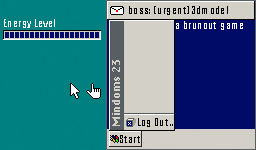
<style>
.page{position:relative;width:256px;height:150px;background:#d3d0c8}
.page>*{position:absolute;margin:0}
.t1{font:10.4px "Impact";color:#000000}
.t2{font:10.4px "Impact";color:#ffffff}
.t3{font:10.4px "Krungthep";color:#d3d0c8}
.t4{font:10.4px "Impact";color:#020203}
</style>
<div class="page">
<p class="t1" style="left:129px;top:6px;width:99px;height:9px">boss:  [urgent] 3dmodel</p>
<p class="t2" style="left:4px;top:19px;width:51px;height:9px">Energy Level</p>
<p class="t2" style="left:176px;top:21px;width:67px;height:9px">a brunout  game</p>
<p class="t3" style="left:112px;top:60px;width:8px;height:66px;rotate:-90deg">Mindoms 23</p>
<p class="t4" style="left:138px;top:118px;width:35px;height:9px">Log Out ..</p>
<p class="t4" style="left:120px;top:135px;width:20px;height:8px">Start</p>
</div>
